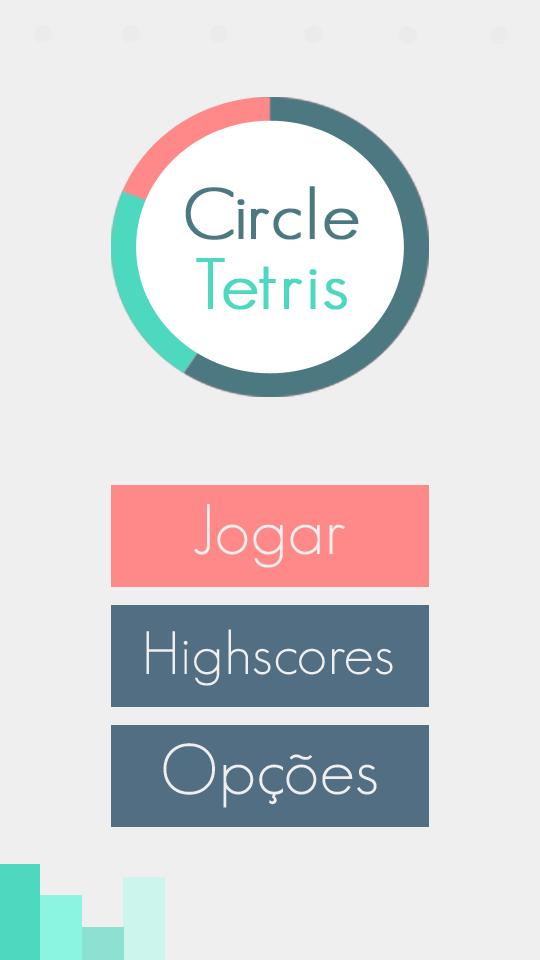
<style>
.page{position:relative;width:540px;height:960px;background:#efefef}
.page>*{position:absolute;margin:0}
.t1{font:70px/70px "GeosansLight";letter-spacing:0.018em;color:#4c7981;font-weight:bold;scale:1.06 1}
.t2{font:70px/70px "GeosansLight";letter-spacing:0.018em;color:#4cd9c0;font-weight:bold;scale:1.06 1}
.t3{font:70px "GeosansLight";letter-spacing:0.018em;color:#efefef}
.t4{font:60px "GeosansLight";letter-spacing:0.018em;color:#efefef}
</style>
<div class="page">
<p class="t1" style="left:185px;top:186px;width:174px;height:124px;text-align:center">Circle<br><span class="t2">Tetris</span></p>
<p class="t3" style="left:194px;top:504px;width:151px;height:64px">Jogar</p>
<p class="t4" style="left:146px;top:629px;width:247px;height:57px">Highscores</p>
<p class="t3" style="left:163px;top:743px;width:214px;height:65px">Opções</p>
</div>
